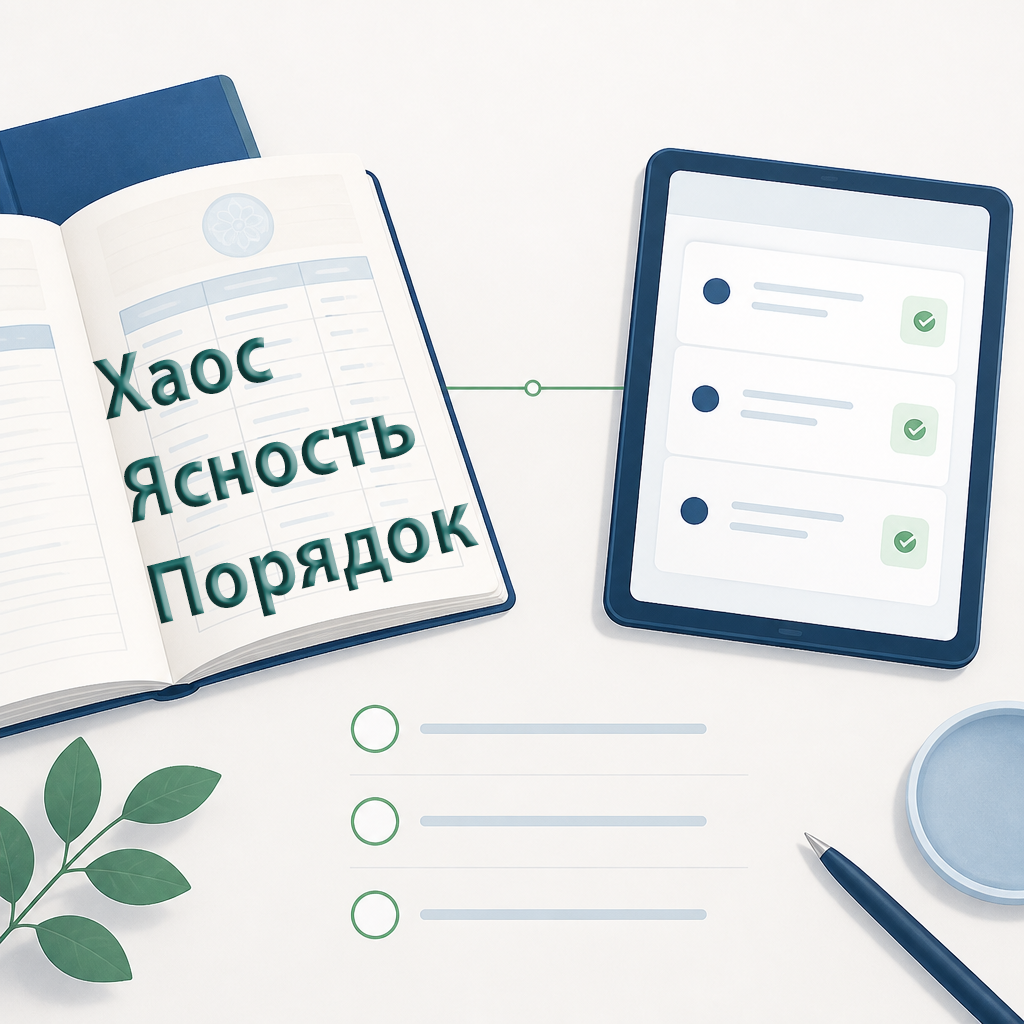
<style>
.page{position:relative;width:1024px;height:1024px}
.page>*{position:absolute;margin:0}
.t1{font:88px "MyriadPro-Bold";scale:0.92 1}
</style>
<div class="page">
<p class="t1" style="left:92px;top:337px;width:387px;height:287px;rotate:-14deg">Хаос<br>Ясность<br>Порядок</p>
</div>
